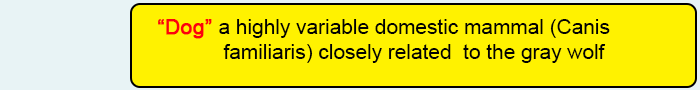
<style>
.page{position:relative;width:700px;height:90px;background:#fff200}
.page>*{position:absolute;margin:0}
.t1{font:20.8px "ArialMT";color:#020202}
.t2{font:20.8px "ArialMT";color:#fd010d}
.t3{font:20.8px "ArialMT";color:#fd010d;font-weight:bold}
</style>
<div class="page">
<p class="t1" style="left:158px;top:19px;width:452px;height:44px"><span class="t2"> </span><span class="t3">“Dog” </span>a highly variable domestic mammal (Canis <br>  familiaris) closely related  to the gray wolf</p>
</div>
